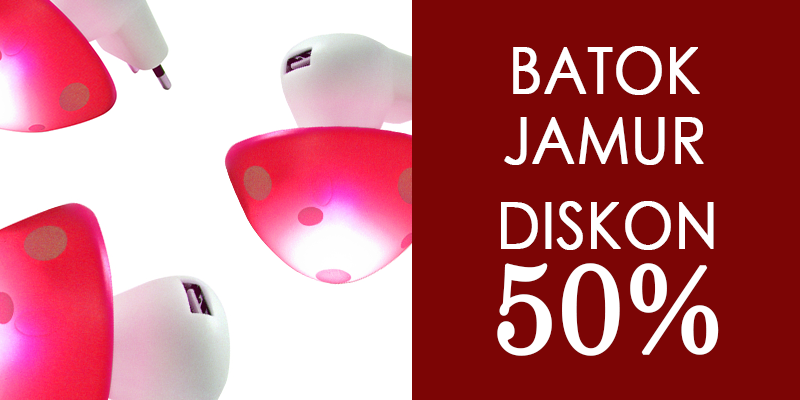
<style>
.page{position:relative;width:800px;height:400px;background:#7c0505}
.page>*{position:absolute;margin:0}
.t1{font:63.6px "CenturyGothic";color:#ffffff;font-weight:bold;scale:0.91 1}
.t2{font:127.2px "Century";color:#ffffff;font-weight:bold;scale:0.91 1}
</style>
<div class="page">
<p class="t1" style="left:504px;top:46px;width:200px;height:119px;text-align:center">BATOK<br>JAMUR</p>
<p class="t1" style="left:501px;top:201px;width:213px;height:49px">DISKON</p>
<p class="t2" style="left:497px;top:263px;width:222px;height:93px">50%</p>
</div>
